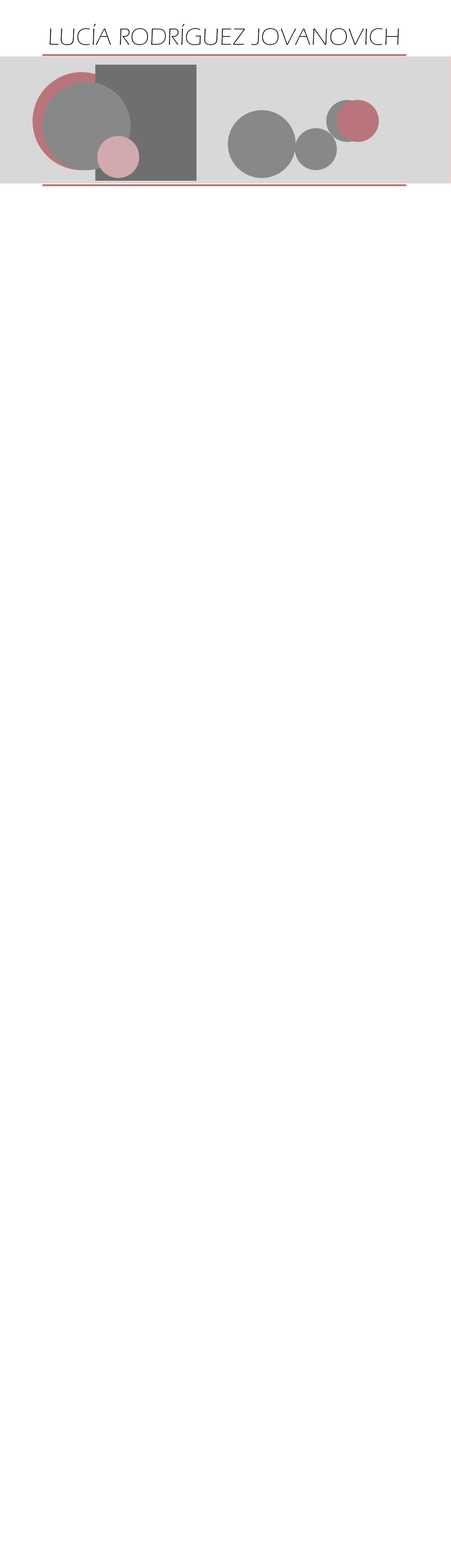
<style>
.page{position:relative;width:451px;height:1568px;background:#ffffff}
.page>*{position:absolute;margin:0}
.t1{font:24.4px "ErasITC-Light";color:#1b1a1a}
</style>
<div class="page">
<p class="t1" style="left:49px;top:24px;width:350px;height:21px">LUCÍA RODRÍGUEZ JOVANOVICH</p>
</div>
